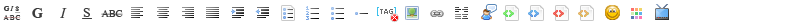
<style>
.page{position:relative;width:800px;height:25px;background:#ffffff}
.page>*{position:absolute;margin:0}
.t1{font:9px "Aparajita-Bold";color:#3b3b3b}
.t2{font:9px "Aparajita-Italic";color:#3b3b3b}
.t3{font:6px "Small Fonts";color:#3b3b3b}
.t4{font:13px "Aparajita";letter-spacing:0.1em;color:#3b3b3b;font-variant:small-caps}
.t5{font:18px "Aparajita-Bold";color:#3b3b3b}
.t6{font:18px "Aparajita-Italic";color:#3b3b3b}
.t7{font:17px "Aparajita";color:#3b3b3b}
.t8{font:18px "Aparajita";color:#3b3b3b;font-variant:small-caps}
.t9{font:10px "Small Fonts";color:#6b6b6b;font-variant:small-caps}
.t10{font:10px "Small Fonts";color:#3bc1ed}
</style>
<div class="page">
<p class="t1" style="left:3px;top:6px;width:7px;height:5px">G</p>
<p class="t2" style="left:10px;top:6px;width:4px;height:5px">I</p>
<p class="t3" style="left:15px;top:6px;width:4px;height:5px">S</p>
<p class="t4" style="left:3px;top:15px;width:18px;height:5px">abc</p>
<p class="t5" style="left:32px;top:8px;width:11px;height:10px">G</p>
<p class="t6" style="left:60px;top:8px;width:7px;height:10px">I</p>
<p class="t7" style="left:83px;top:8px;width:7px;height:9px">S</p>
<p class="t8" style="left:101px;top:10px;width:22px;height:7px">abc</p>
<p class="t9" style="left:377px;top:7px;width:19px;height:9px"><span class="t10">[</span>tag<span class="t10">]</span></p>
</div>
